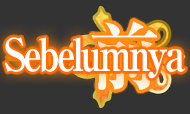
<style>
.page{position:relative;width:190px;height:114px;background:#333333}
.page>*{position:absolute;margin:0}
.t1{font:45px "RyuminPro-ExBold";letter-spacing:-0.08em;color:#ffffff;scale:0.83 1}
</style>
<div class="page">
<p class="t1" style="left:4px;top:37px;width:182px;height:42px">Sebelumnya</p>
</div>
